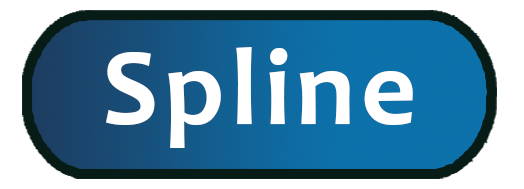
<style>
.page{position:relative;width:524px;height:189px;background:#ffffff}
.page>*{position:absolute;margin:0}
.t1{font:110.6px "Candara-Bold";letter-spacing:0.05em;color:#ffffff}
</style>
<div class="page">
<p class="t1" style="left:106px;top:47px;width:307px;height:101px">Spline</p>
</div>
